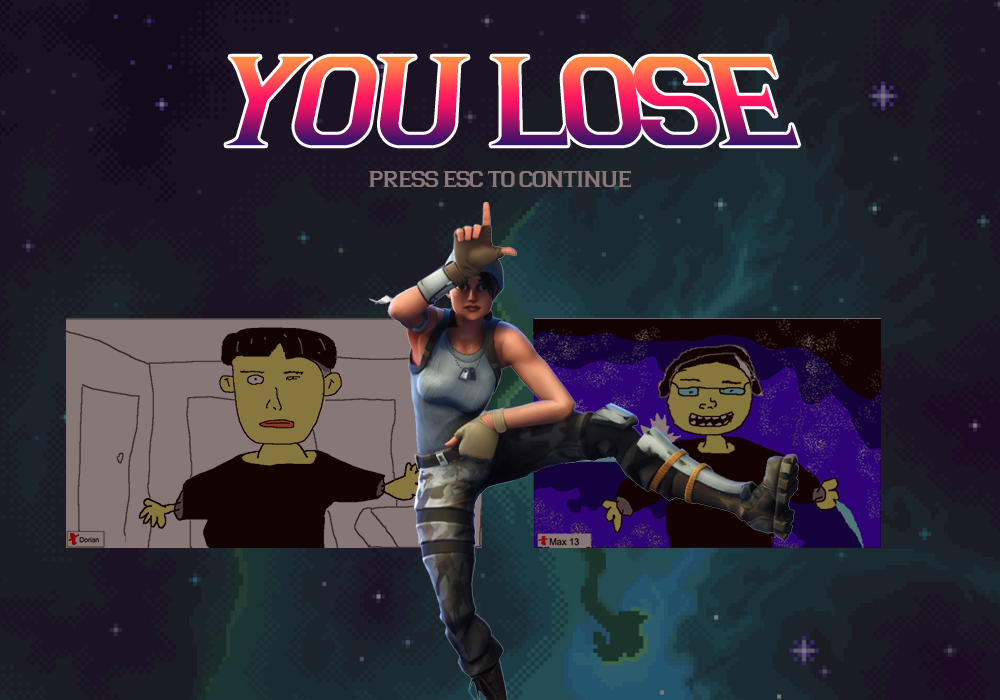
<style>
.page{position:relative;width:1000px;height:700px}
.page>*{position:absolute;margin:0}
.t1{font:124.2px "Argentina";letter-spacing:-0.04em}
.t2{font:22.7px "Argentina";letter-spacing:-0.04em;color:#887777}
</style>
<div class="page">
<p class="t1" style="left:226px;top:56px;width:573px;height:90px">YOU LOSE</p>
<p class="t2" style="left:368px;top:171px;width:263px;height:16px">PRESS ESC TO CONTINUE</p>
</div>
